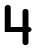
<style>
.page{position:relative;width:35px;height:50px;background:#ffffff}
.page>*{position:absolute;margin:0}
.t1{font:61.9px "OCRAExtended";color:#000000;scale:1.16 1}
</style>
<div class="page">
<p class="t1" style="left:4px;top:5px;width:28px;height:40px">4</p>
</div>
